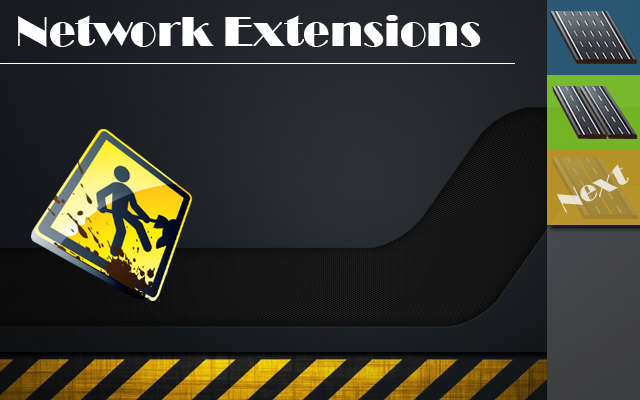
<style>
.page{position:relative;width:640px;height:400px}
.page>*{position:absolute;margin:0}
.t1{font:44px "Broadway";color:#ffffff}
.t2{font:29.3px "Broadway";color:#eae3d4}
</style>
<div class="page">
<p class="t1" style="left:18px;top:15px;width:463px;height:32px">Network Extensions</p>
<p class="t2" style="left:557px;top:164px;width:72px;height:49px;rotate:-26deg">Next</p>
</div>
